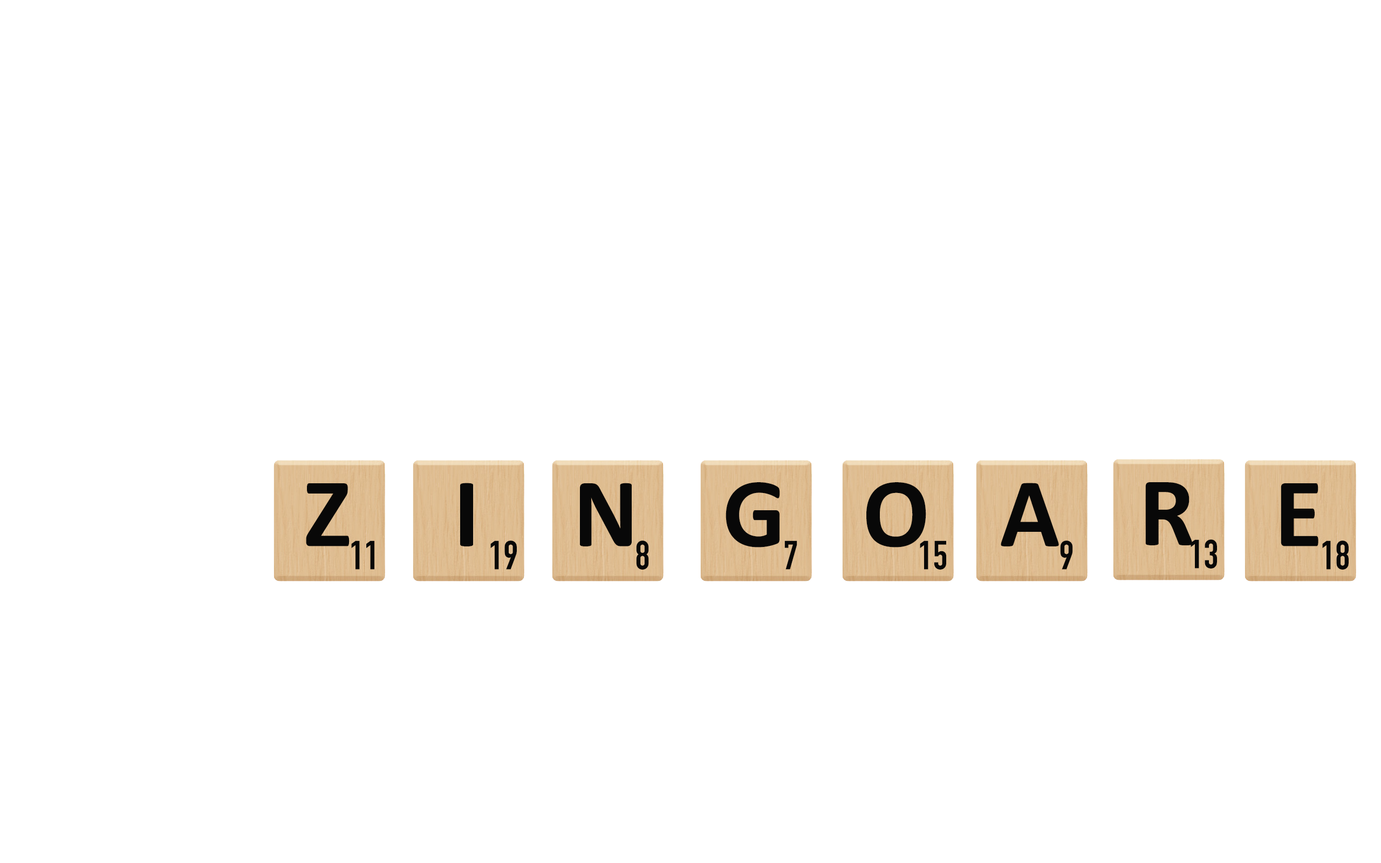
<style>
.page{position:relative;width:1381px;height:863px;background:#ffffff}
.page>*{position:absolute;margin:0}
.t1{font:99.3px "Calibri-Bold";color:#080808}
.t2{font:39.9px "DINCondensed-Bold";color:#080808}
</style>
<div class="page">
<p class="t1" style="left:306px;top:483px;width:44px;height:64px">Z</p>
<p class="t1" style="left:460px;top:483px;width:13px;height:64px">I</p>
<p class="t1" style="left:580px;top:483px;width:52px;height:64px">N</p>
<p class="t1" style="left:726px;top:482px;width:54px;height:66px">G</p>
<p class="t1" style="left:867px;top:482px;width:59px;height:66px">O</p>
<p class="t1" style="left:1001px;top:483px;width:58px;height:64px">A</p>
<p class="t1" style="left:1145px;top:482px;width:48px;height:63px">R</p>
<p class="t1" style="left:1281px;top:483px;width:38px;height:64px">E</p>
<p class="t2" style="left:351px;top:541px;width:23px;height:29px">11</p>
<p class="t2" style="left:490px;top:541px;width:27px;height:29px">19</p>
<p class="t2" style="left:636px;top:541px;width:13px;height:29px">8</p>
<p class="t2" style="left:785px;top:541px;width:12px;height:29px">7</p>
<p class="t2" style="left:920px;top:541px;width:26px;height:29px">15</p>
<p class="t2" style="left:1060px;top:541px;width:13px;height:29px">9</p>
<p class="t2" style="left:1191px;top:540px;width:26px;height:29px">13</p>
<p class="t2" style="left:1322px;top:541px;width:27px;height:29px">18</p>
</div>
